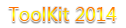
<style>
.page{position:relative;width:126px;height:28px;background:#ffffff}
.page>*{position:absolute;margin:0}
.t1{font:18px "MicrosoftYaHei"}
</style>
<div class="page">
<p class="t1" style="left:8px;top:7px;width:109px;height:14px">ToolKit 2014</p>
</div>
